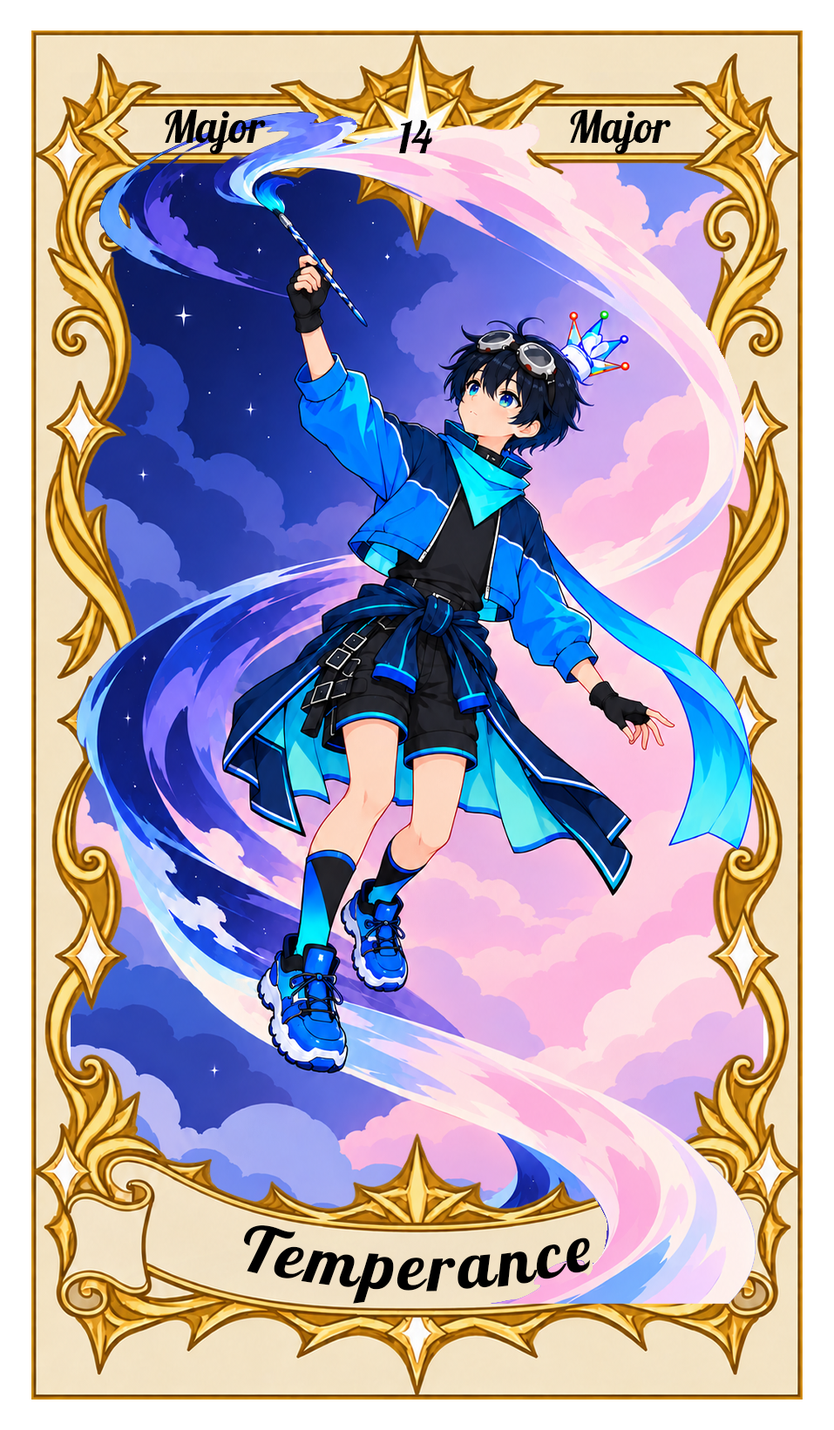
<style>
.page{position:relative;width:834px;height:1430px}
.page>*{position:absolute;margin:0}
.t1{font:43.6px "Lobster-Regular";color:#000000}
.t2{font:65.3px "Lobster-Regular";letter-spacing:0.05em;color:#000000}
</style>
<div class="page">
<p class="t1" style="left:165px;top:110px;width:101px;height:44px">Major</p>
<p class="t1" style="left:570px;top:110px;width:101px;height:44px">Major</p>
<p class="t1" style="left:399px;top:120px;width:33px;height:33px">14</p>
<p class="t2" style="left:244px;top:1226px;width:346px;height:78px">Temperance</p>
</div>
